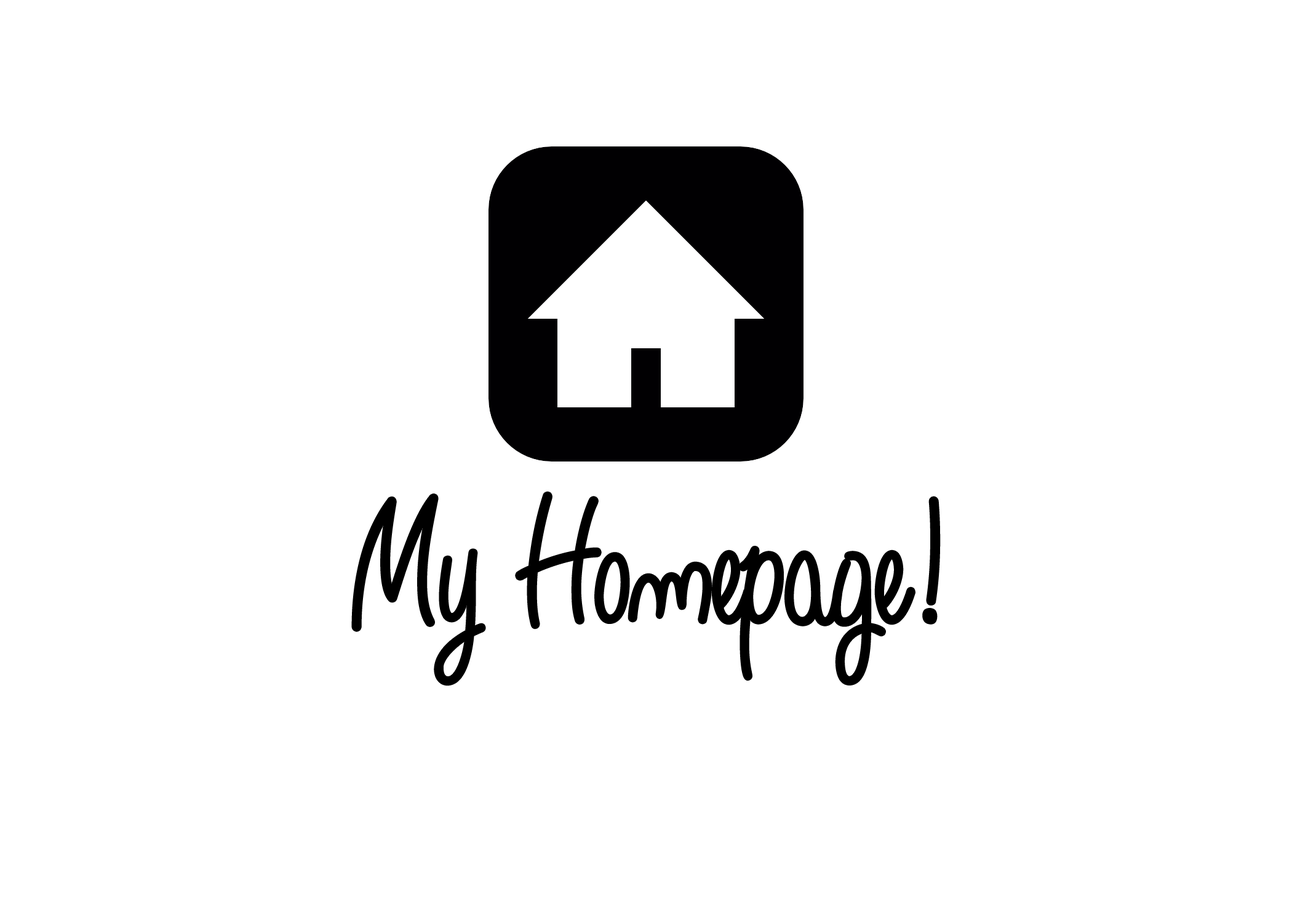
<style>
.page{position:relative;width:1292px;height:923px;background:#ffffff}
.page>*{position:absolute;margin:0}
.t1{font:184.6px "AngeliqueRose-FFP";color:#000000}
</style>
<div class="page">
<p class="t1" style="left:353px;top:493px;width:586px;height:191px">My Homepage!</p>
</div>
